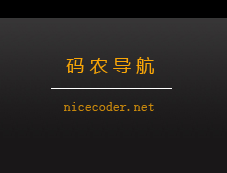
<style>
.page{position:relative;width:227px;height:173px;background:#191718}
.page>*{position:absolute;margin:0}
.t1{font:18px "MicrosoftYaHei";color:#f9a607}
.t2{font:14px "SimSun";color:#c8880c}
</style>
<div class="page">
<p class="t1" style="left:66px;top:57px;width:88px;height:17px">码 农 导 航</p>
<p class="t2" style="left:64px;top:102px;width:90px;height:9px">nicecoder.net</p>
</div>
